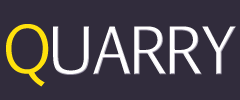
<style>
.page{position:relative;width:240px;height:100px;background:#312c3c}
.page>*{position:absolute;margin:0}
.t1{font:62.5px "EuphemiaCAS";letter-spacing:-0.025em;color:#ffe20d}
.t2{font:62.5px "EuphemiaCAS";letter-spacing:-0.025em;color:#ffffff}
</style>
<div class="page">
<p class="t1" style="left:6px;top:24px;width:43px;height:63px">Q</p>
<p class="t2" style="left:53px;top:26px;width:183px;height:49px">UARRY</p>
</div>
